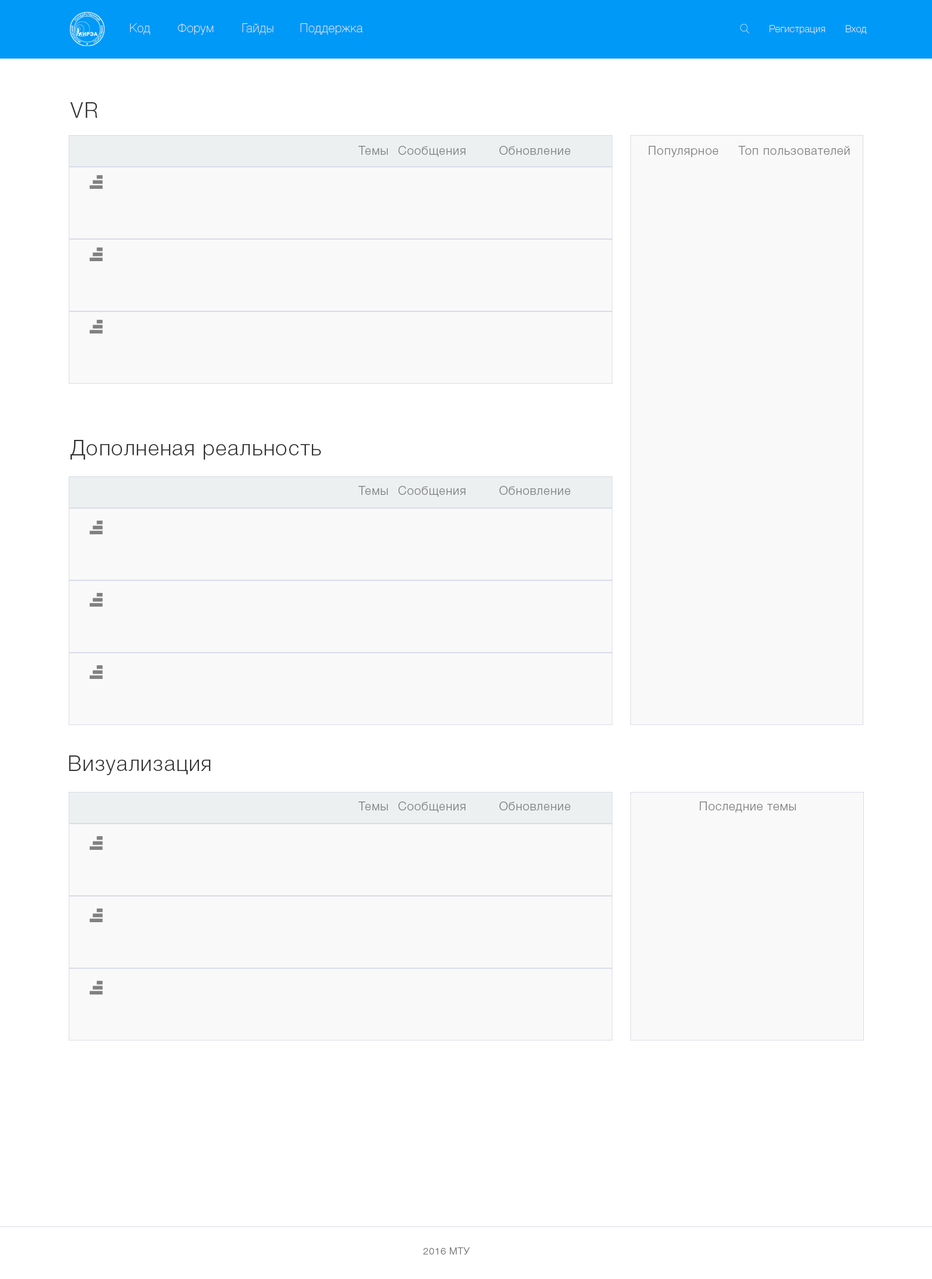
<style>
.page{position:relative;width:932px;height:1279px;background:#ffffff}
.page>*{position:absolute;margin:0}
.t1{font:12px "HelveticaNeueCyr-UltraLight";letter-spacing:0.05em;color:#eeeeee}
.t2{font:9.6px "HelveticaNeueCyr-UltraLight";letter-spacing:0.05em;color:#eeeeee}
.t3{font:20.9px "HelveticaNeueCyr-Light";letter-spacing:0.05em;color:#333333}
.t4{font:12px "HelveticaNeueCyr-Light";letter-spacing:0.05em;color:#808080}
.t5{font:9.6px "HelveticaNeueCyr-Light";letter-spacing:0.05em;color:#777777}
</style>
<div class="page">
<p class="t1" style="left:130px;top:23px;width:21px;height:12px">Код</p>
<p class="t1" style="left:178px;top:23px;width:35px;height:12px">Форум</p>
<p class="t1" style="left:242px;top:23px;width:32px;height:12px">Гайды</p>
<p class="t1" style="left:301px;top:23px;width:62px;height:12px">Поддержка</p>
<p class="t2" style="left:770px;top:25px;width:55px;height:9px">Регистрация</p>
<p class="t2" style="left:846px;top:25px;width:21px;height:9px">Вход</p>
<p class="t3" style="left:70px;top:102px;width:27px;height:16px">VR</p>
<p class="t4" style="left:359px;top:146px;width:29px;height:9px">Темы</p>
<p class="t4" style="left:399px;top:146px;width:67px;height:11px">Сообщения</p>
<p class="t4" style="left:500px;top:146px;width:71px;height:9px">Обновление</p>
<p class="t4" style="left:649px;top:146px;width:69px;height:11px">Популярное</p>
<p class="t4" style="left:739px;top:146px;width:111px;height:9px">Топ пользователей</p>
<p class="t3" style="left:71px;top:440px;width:250px;height:20px">Дополненая реальность</p>
<p class="t4" style="left:359px;top:486px;width:29px;height:9px">Темы</p>
<p class="t4" style="left:399px;top:486px;width:67px;height:11px">Сообщения</p>
<p class="t4" style="left:500px;top:486px;width:71px;height:9px">Обновление</p>
<p class="t3" style="left:69px;top:755px;width:141px;height:20px">Визуализация</p>
<p class="t4" style="left:359px;top:801px;width:29px;height:9px">Темы</p>
<p class="t4" style="left:399px;top:801px;width:67px;height:12px">Сообщения</p>
<p class="t4" style="left:500px;top:801px;width:71px;height:9px">Обновление</p>
<p class="t4" style="left:700px;top:801px;width:96px;height:12px">Последние темы</p>
<p class="t5" style="left:423px;top:1247px;width:47px;height:7px">2016 МТУ</p>
</div>
